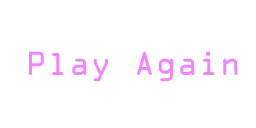
<style>
.page{position:relative;width:256px;height:128px;background:#ffffff}
.page>*{position:absolute;margin:0}
.t1{font:30px "OCRAStd";color:#f284ff}
</style>
<div class="page">
<p class="t1" style="left:29px;top:51px;width:209px;height:31px">Play Again</p>
</div>
